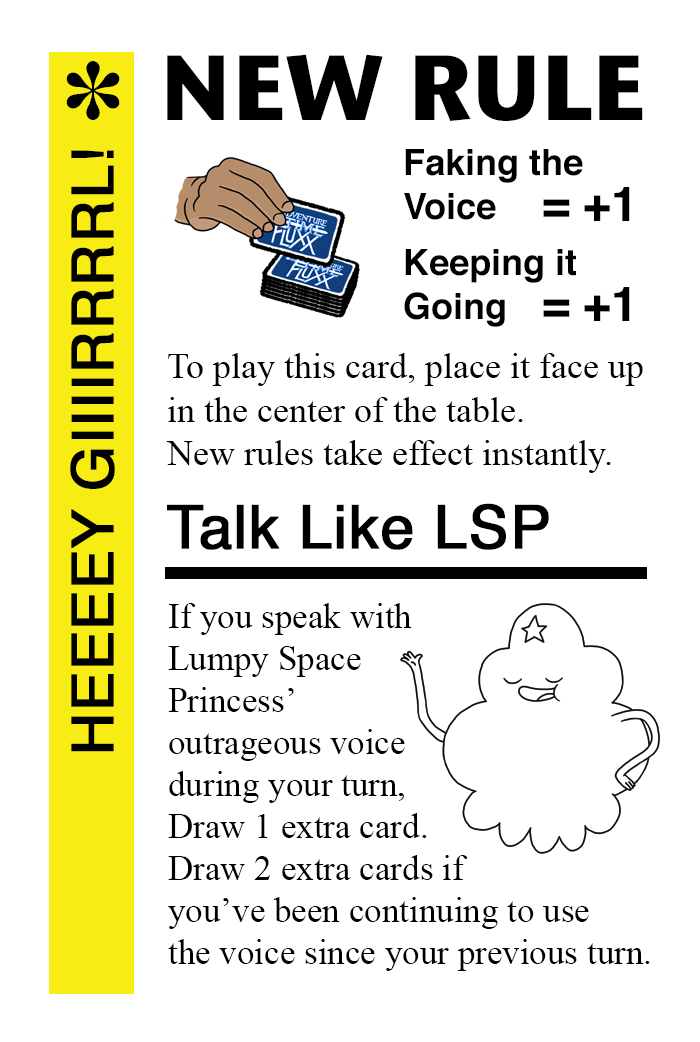
<style>
.page{position:relative;width:700px;height:1042px;background:#ffffff}
.page>*{position:absolute;margin:0}
.t1{font:92px "StoneSansITC-Bold";color:#000000}
.t2{font:82px "MS-Gothic";color:#000000}
.t3{font:58px "Helvetica";color:#000000;font-weight:bold}
.t4{font:36px "Helvetica-Bold";color:#000000}
.t5{font:48px "Helvetica-Bold";color:#000000}
.t6{font:36px "TimesNewRomanPSMT";color:#000000}
.t7{font:60px "Helvetica";color:#000000;font-weight:bold}
.t8{font:35px "TimesNewRomanPSMT";color:#000000}
</style>
<div class="page">
<p class="t1" style="left:167px;top:54px;width:476px;height:67px">NEW RULE</p>
<p class="t2" style="left:66px;top:61px;width:54px;height:59px">✽</p>
<p class="t3" style="left:70px;top:150px;width:45px;height:602px;rotate:-90deg">HEEEEY GIIIIRRRRL!</p>
<p class="t4" style="left:404px;top:149px;width:179px;height:71px">Faking the<br>Voice</p>
<p class="t5" style="left:543px;top:187px;width:87px;height:34px">= +1</p>
<p class="t4" style="left:404px;top:249px;width:172px;height:78px">Keeping it<br>Going</p>
<p class="t5" style="left:543px;top:287px;width:87px;height:34px">= +1</p>
<p class="t6" style="left:166px;top:353px;width:477px;height:120px">To play this card, place it face up<br>in the center of the table. <br>New rules take effect instantly.</p>
<p class="t7" style="left:167px;top:503px;width:382px;height:47px">Talk Like LSP</p>
<p class="t8" style="left:168px;top:603px;width:482px;height:368px">If you speak with <br>Lumpy Space <br>Princess’ <br>outrageous voice <br>during your turn, <br>Draw 1 extra card. <br>Draw 2 extra cards if <br>you’ve been continuing to use <br>the voice since your previous turn.</p>
</div>
